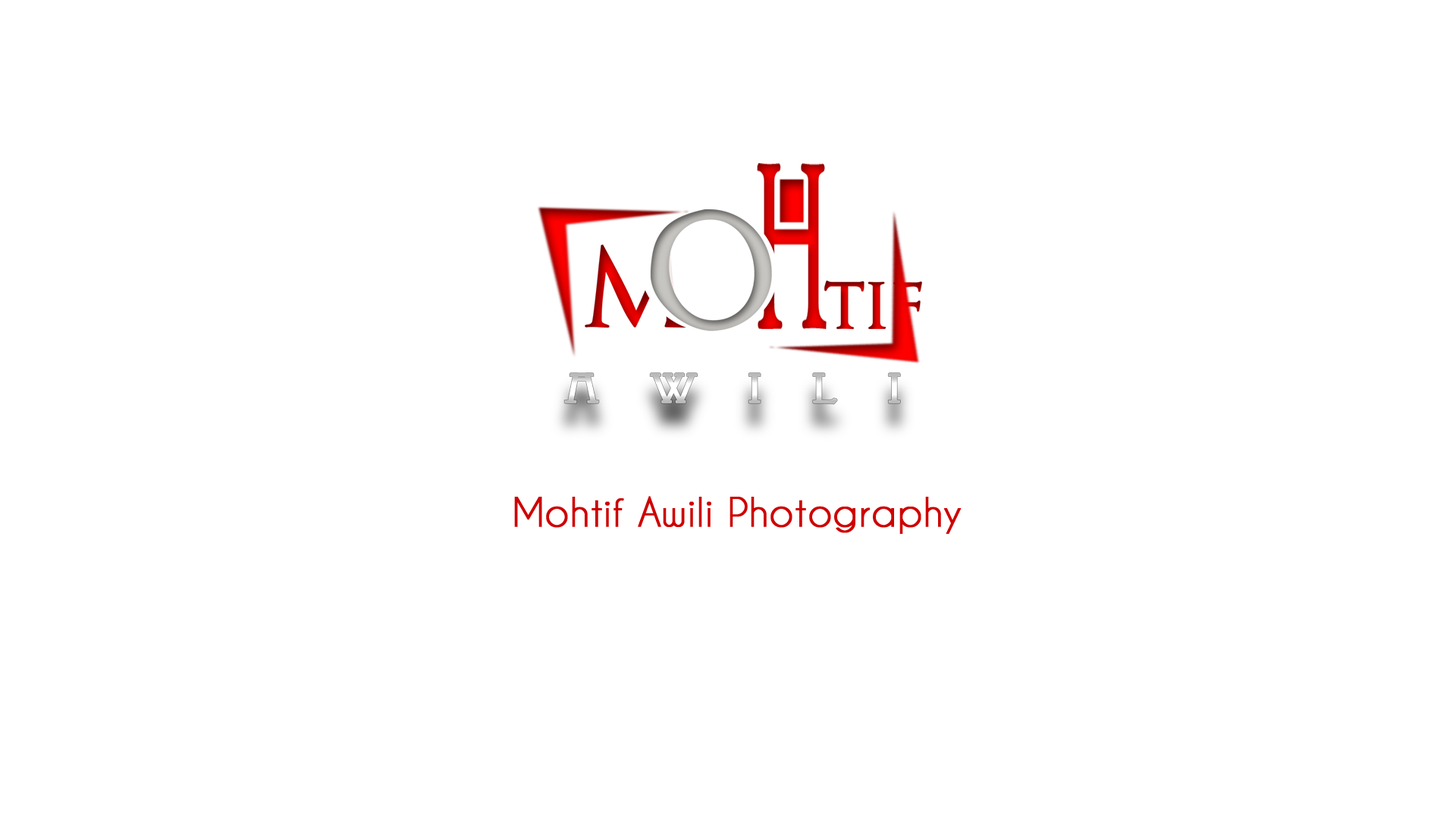
<style>
.page{position:relative;width:1456px;height:819px;background:#ffffff}
.page>*{position:absolute;margin:0}
.t1{font:37.9px "CaviarDreams";color:#ce0000;font-weight:bold}
</style>
<div class="page">
<p class="t1" style="left:514px;top:496px;width:448px;height:38px">Mohtif Awili Photography</p>
</div>
